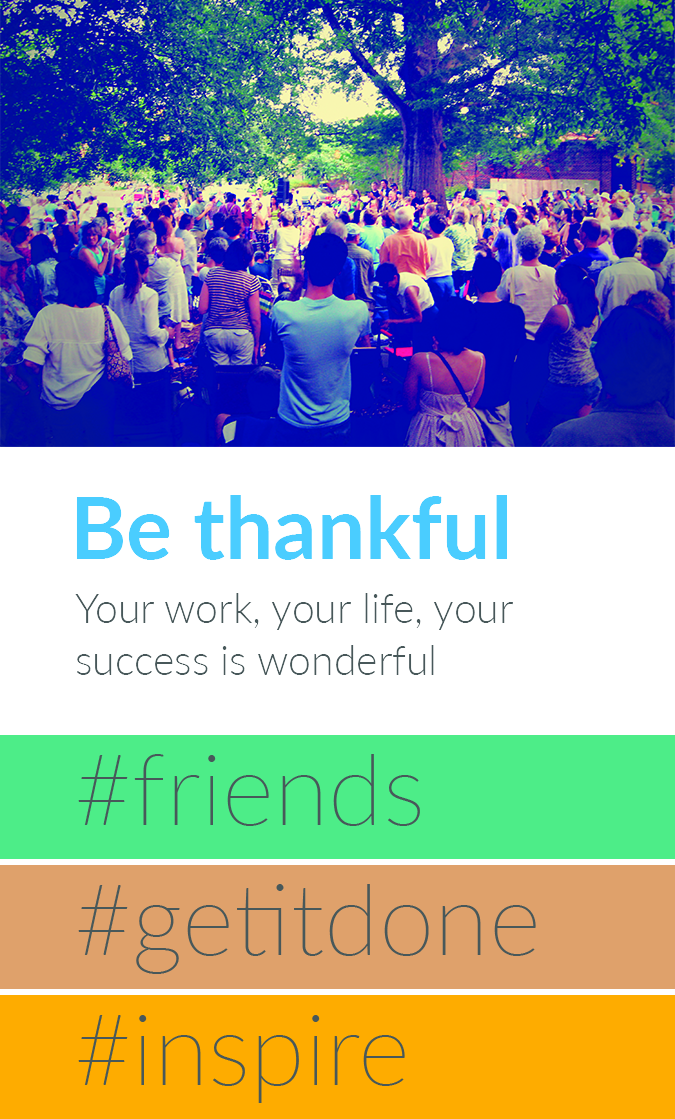
<style>
.page{position:relative;width:675px;height:1119px;background:#ffffff}
.page>*{position:absolute;margin:0}
.t1{font:86px "Lato-Bold";color:#4acdff}
.t2{font:41px/52px "Lato-Light";color:#48585a}
</style>
<div class="page">
<p class="t1" style="left:76px;top:495px;width:431px;height:65px">Be thankful</p>
<p class="t2" style="left:75px;top:593px;width:438px;height:82px;text-align:right">Your work, your life, your success is wonderful</p>
</div>
